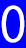
<style>
.page{position:relative;width:26px;height:48px;background:#0000ff}
.page>*{position:absolute;margin:0}
.t1{font:47.6px "KozGoPr6N-Regular";color:#ffffff}
</style>
<div class="page">
<p class="t1" style="left:1px;top:5px;width:24px;height:38px">0</p>
</div>
